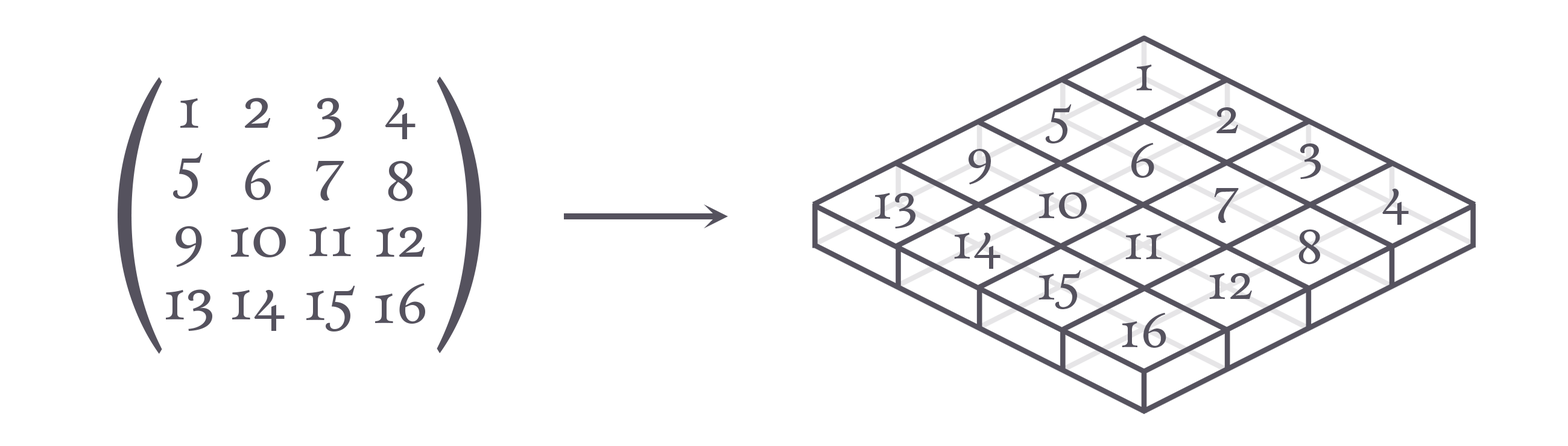
<style>
.page{position:relative;width:1568px;height:446px;background:#ffffff}
.page>*{position:absolute;margin:0}
.t1{font:52.1px "Calendas-Plus";letter-spacing:0.005em;color:#55525e}
.t2{font:287.7px "Calendas-Plus";letter-spacing:0.005em;color:#55525e;scale:0.58 1}
.t3{font:60.3px "Calendas-Plus";letter-spacing:0.005em;color:#55525e}
.t4{font:60.2px "Calendas-Plus";letter-spacing:0.005em;color:#55525e}
.t5{font:60.5px "Calendas-Plus";letter-spacing:0.005em;color:#55525e}
.t6{font:60px "Calendas-Plus";letter-spacing:0.005em;color:#55525e}
</style>
<div class="page">
<p class="t1" style="left:1136px;top:65px;width:16px;height:25px">1</p>
<p class="t2" style="left:118px;top:77px;width:44px;height:277px">(</p>
<p class="t2" style="left:437px;top:77px;width:44px;height:276px">)</p>
<p class="t3" style="left:180px;top:98px;width:18px;height:30px">1</p>
<p class="t3" style="left:244px;top:98px;width:27px;height:30px">2</p>
<p class="t3" style="left:317px;top:98px;width:24px;height:41px">3</p>
<p class="t3" style="left:385px;top:98px;width:31px;height:41px">4</p>
<p class="t1" style="left:1045px;top:104px;width:27px;height:40px">5</p>
<p class="t1" style="left:1216px;top:107px;width:22px;height:26px">2</p>
<p class="t1" style="left:969px;top:149px;width:22px;height:36px">9</p>
<p class="t1" style="left:1131px;top:143px;width:23px;height:35px">6</p>
<p class="t1" style="left:1300px;top:144px;width:21px;height:35px">3</p>
<p class="t4" style="left:173px;top:153px;width:30px;height:46px">5</p>
<p class="t4" style="left:245px;top:160px;width:26px;height:40px">6</p>
<p class="t4" style="left:316px;top:161px;width:28px;height:40px">7</p>
<p class="t4" style="left:388px;top:161px;width:25px;height:40px">8</p>
<p class="t1" style="left:874px;top:193px;width:41px;height:36px">13</p>
<p class="t1" style="left:1038px;top:192px;width:49px;height:27px">10</p>
<p class="t1" style="left:1214px;top:188px;width:25px;height:35px">7</p>
<p class="t1" style="left:1382px;top:189px;width:27px;height:36px">4</p>
<p class="t5" style="left:175px;top:226px;width:27px;height:41px">9</p>
<p class="t5" style="left:231px;top:227px;width:55px;height:31px">10</p>
<p class="t5" style="left:309px;top:227px;width:42px;height:29px">11</p>
<p class="t5" style="left:376px;top:227px;width:49px;height:30px">12</p>
<p class="t1" style="left:954px;top:233px;width:47px;height:36px">14</p>
<p class="t1" style="left:1125px;top:233px;width:37px;height:26px">11</p>
<p class="t1" style="left:1298px;top:229px;width:22px;height:36px">8</p>
<p class="t1" style="left:1038px;top:270px;width:43px;height:39px">15</p>
<p class="t1" style="left:1209px;top:273px;width:43px;height:26px">12</p>
<p class="t6" style="left:166px;top:289px;width:46px;height:42px">13</p>
<p class="t6" style="left:232px;top:290px;width:53px;height:41px">14</p>
<p class="t6" style="left:306px;top:286px;width:49px;height:46px">15</p>
<p class="t6" style="left:375px;top:283px;width:50px;height:41px">16</p>
<p class="t1" style="left:1122px;top:313px;width:44px;height:35px">16</p>
</div>
